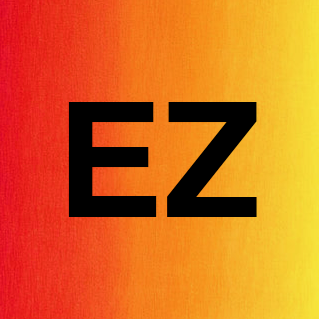
<style>
.page{position:relative;width:319px;height:319px}
.page>*{position:absolute;margin:0}
.t1{font:160px "Helvetica-Bold";color:#000000}
</style>
<div class="page">
<p class="t1" style="left:68px;top:102px;width:189px;height:115px">EZ</p>
</div>
